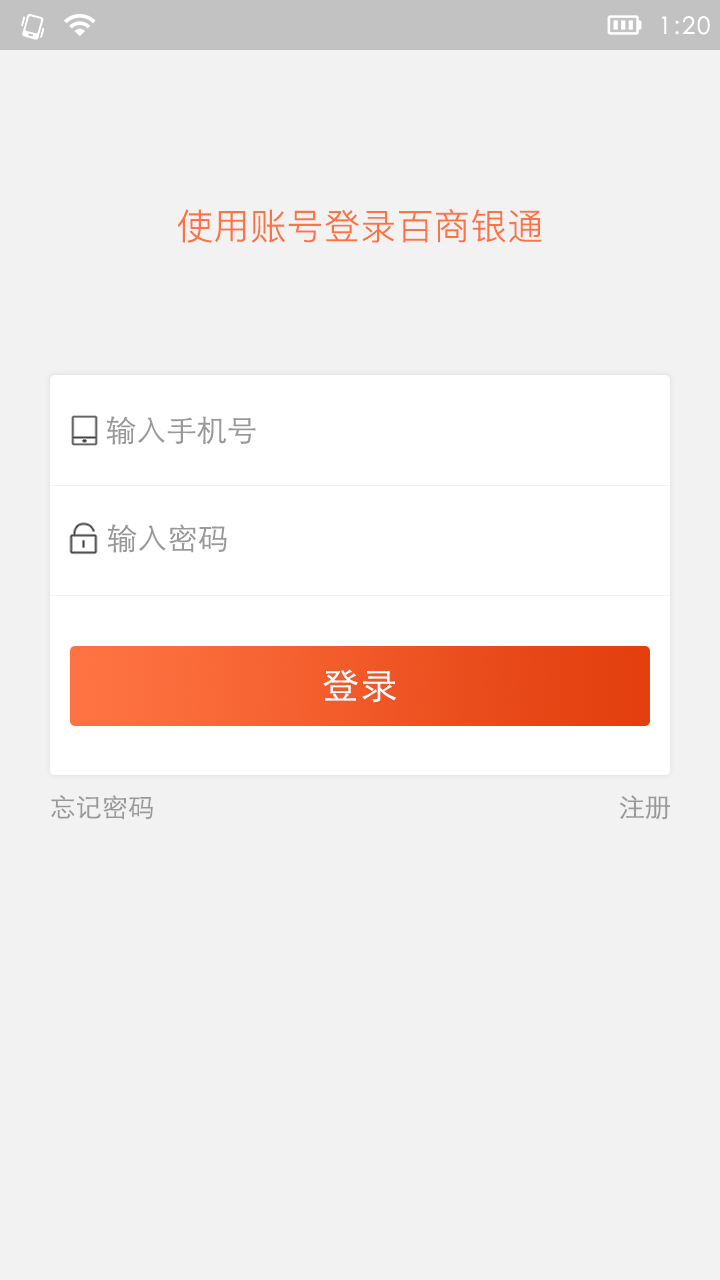
<style>
.page{position:relative;width:720px;height:1280px;background:#f2f2f2}
.page>*{position:absolute;margin:0}
.t1{font:24px "STXihei";letter-spacing:0.075em;color:#ffffff}
.t2{font:36px "PingFangSC-Light";letter-spacing:0.02em;color:#ff7342}
.t3{font:30px "STHeitiSC-Light";color:#999999}
.t4{font:36px "STHeitiSC-Light";letter-spacing:0.075em;color:#ffffff}
.t5{font:26px "STHeitiSC-Light";color:#999999}
</style>
<div class="page">
<p class="t1" style="left:661px;top:16px;width:49px;height:19px">1:20</p>
<p class="t2" style="left:178px;top:209px;width:364px;height:34px">使用账号登录百商银通</p>
<p class="t3" style="left:106px;top:416px;width:150px;height:29px">输入手机号</p>
<p class="t3" style="left:107px;top:524px;width:120px;height:29px">输入密码</p>
<p class="t4" style="left:323px;top:669px;width:73px;height:34px">登录</p>
<p class="t5" style="left:51px;top:795px;width:102px;height:25px">忘记密码</p>
<p class="t5" style="left:620px;top:795px;width:50px;height:25px">注册</p>
</div>
